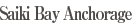
<style>
.page{position:relative;width:132px;height:27px;background:#ffffff}
.page>*{position:absolute;margin:0}
.t1{font:18px "RyuminPro-ExBold";letter-spacing:-0.08em;color:#4c4843;scale:0.85 1}
</style>
<div class="page">
<p class="t1" style="left:0px;top:6px;width:132px;height:17px">Saiki Bay Anchorage</p>
</div>
